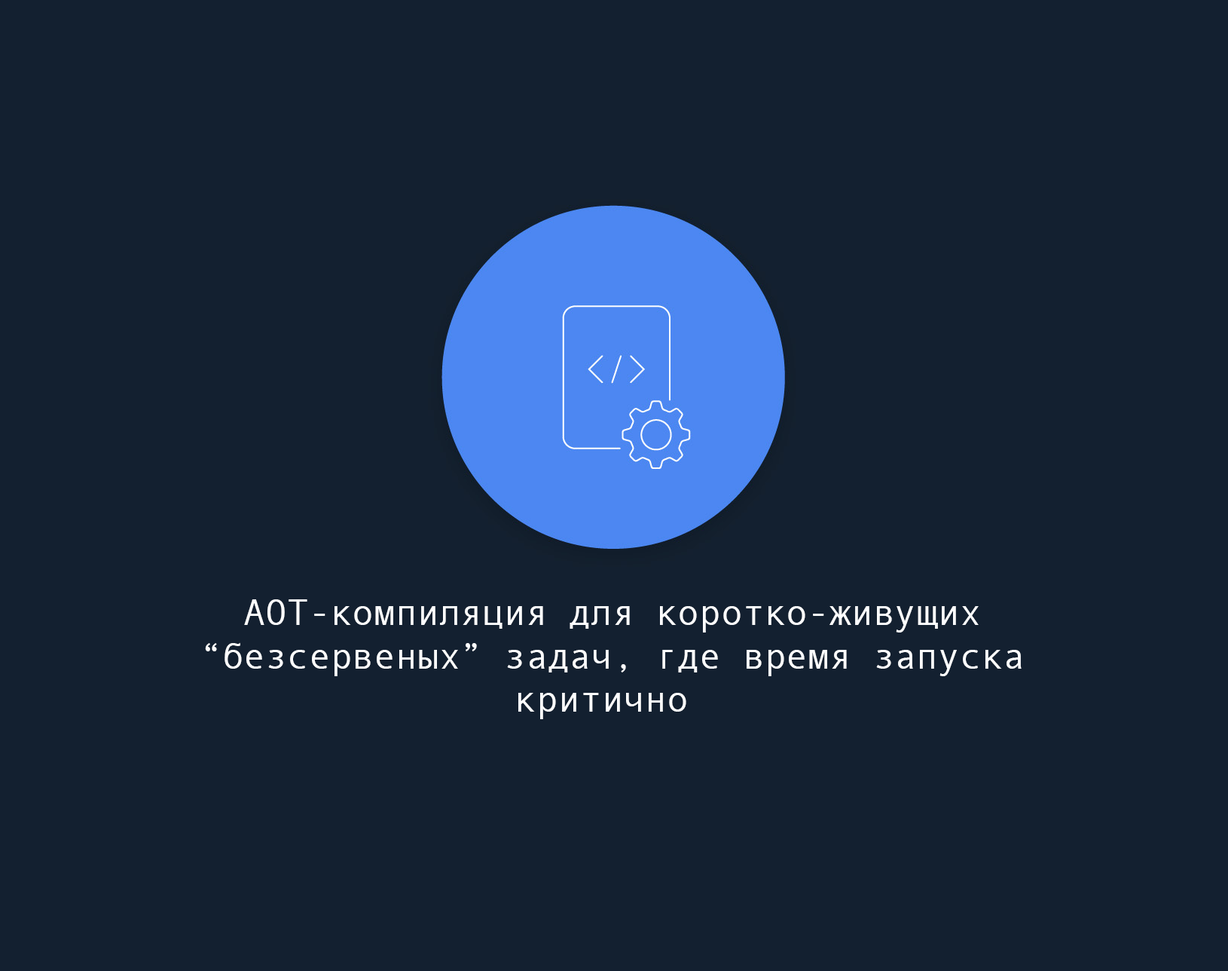
<style>
.page{position:relative;width:1228px;height:971px;background:#132030}
.page>*{position:absolute;margin:0}
.t1{font:36.2px "AndaleMono";color:#fdfeff}
</style>
<div class="page">
<p class="t1" style="left:205px;top:599px;width:817px;height:120px;text-align:center">AOT-компиляция для коротко-живущих<br>“безсервеных” задач, где время запуска<br>критично</p>
</div>
